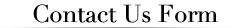
<style>
.page{position:relative;width:252px;height:28px;background:#ffffff}
.page>*{position:absolute;margin:0}
.t1{font:24px "Didot";color:#000000}
</style>
<div class="page">
<p class="t1" style="left:33px;top:4px;width:185px;height:19px">Contact Us Form</p>
</div>
